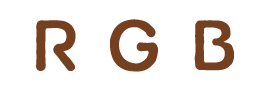
<style>
.page{position:relative;width:270px;height:90px;background:#ffffff}
.page>*{position:absolute;margin:0}
.t1{font:72px "HaanBaekjeB";color:#744020}
</style>
<div class="page">
<p class="t1" style="left:36px;top:19px;width:198px;height:53px">R G B</p>
</div>
